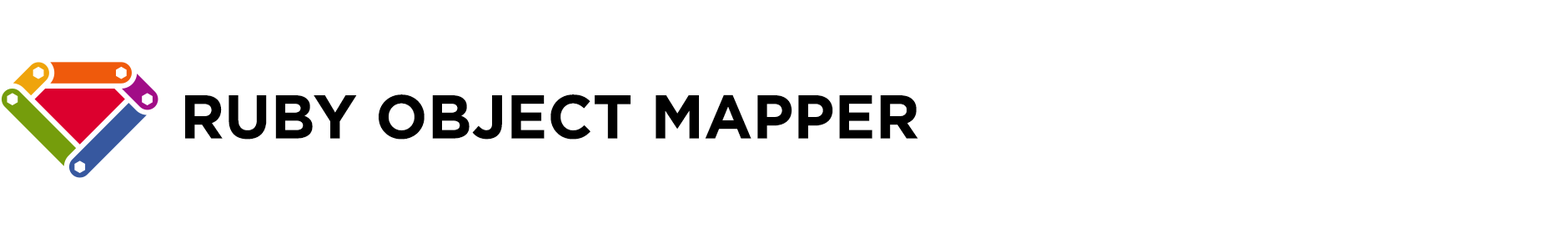
<style>
.page{position:relative;width:1568px;height:234px;background:#ffffff}
.page>*{position:absolute;margin:0}
.t1{font:61.3px "Gotham-Bold";color:#000000}
</style>
<div class="page">
<p class="t1" style="left:185px;top:94px;width:733px;height:45px">RUBY OBJECT MAPPER</p>
</div>
